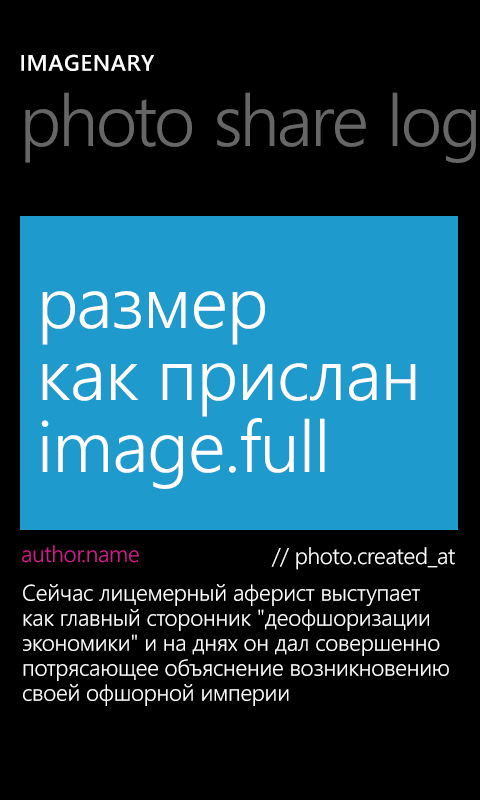
<style>
.page{position:relative;width:480px;height:800px;background:#000000}
.page>*{position:absolute;margin:0}
.t1{font:22.7px "SegoeWP-Semibold";letter-spacing:0.025em;color:#ffffff;text-transform:uppercase}
.t2{font:72px/72px "SegoeWP-SemiLight";letter-spacing:-0.01em;color:#ffffff}
.t3{font:22.7px "SegoeWP-SemiLight";letter-spacing:-0.01em;color:#cd1f89}
.t4{font:22.7px "SegoeWP-SemiLight";letter-spacing:-0.01em;color:#ffffff}
.t5{font:22.7px/25px "SegoeWP-SemiLight";letter-spacing:-0.01em;color:#ffffff}
</style>
<div class="page">
<p class="t1" style="left:21px;top:54px;width:133px;height:17px">IMAGENARY</p>
<p class="t2" style="left:41px;top:291px;width:375px;height:198px">размер<br>как прислан<br>image.full</p>
<p class="t3" style="left:22px;top:545px;width:117px;height:18px">author.name</p>
<p class="t4" style="left:271px;top:547px;width:184px;height:23px">// photo.created_at</p>
<p class="t5" style="left:23px;top:584px;width:426px;height:122px">Сейчас лицемерный аферист выступает как главный сторонник "деофшоризации экономики" и на днях он дал совершенно потрясающее объяснение возникновению своей офшорной империи</p>
</div>
